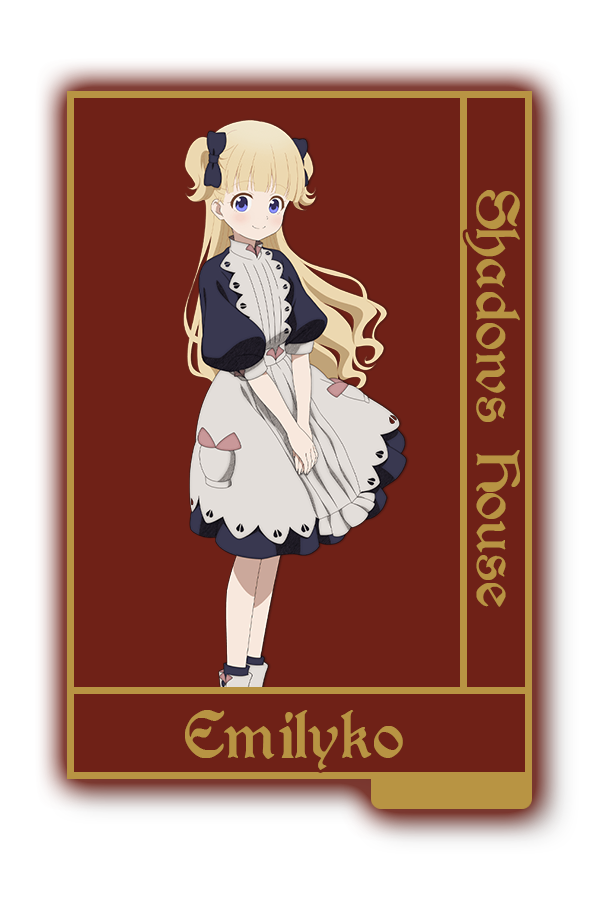
<style>
.page{position:relative;width:600px;height:900px;background:#6f2117}
.page>*{position:absolute;margin:0}
.t1{font:67.9px "Augusta-Regular";color:#b89443}
.t2{font:75px "Augusta-Regular";color:#b89443}
</style>
<div class="page">
<p class="t1" style="left:465px;top:190px;width:55px;height:417px;rotate:90deg">Shadows House</p>
<p class="t2" style="left:185px;top:710px;width:218px;height:60px">Emilyko</p>
</div>
